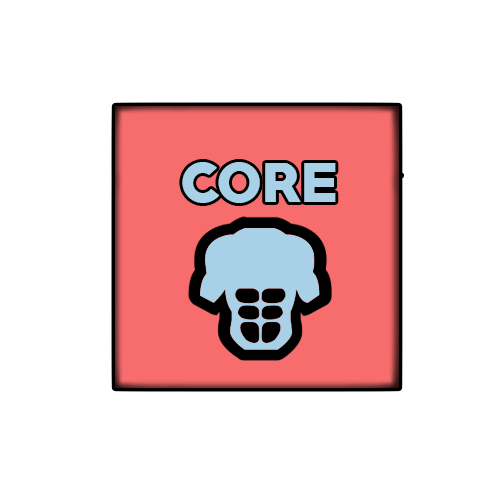
<style>
.page{position:relative;width:500px;height:500px;background:#ffffff}
.page>*{position:absolute;margin:0}
.t1{font:50px "PRIMETIME-Regular";color:#a8d0e6}
</style>
<div class="page">
<p class="t1" style="left:182px;top:162px;width:154px;height:41px">CORE</p>
</div>
